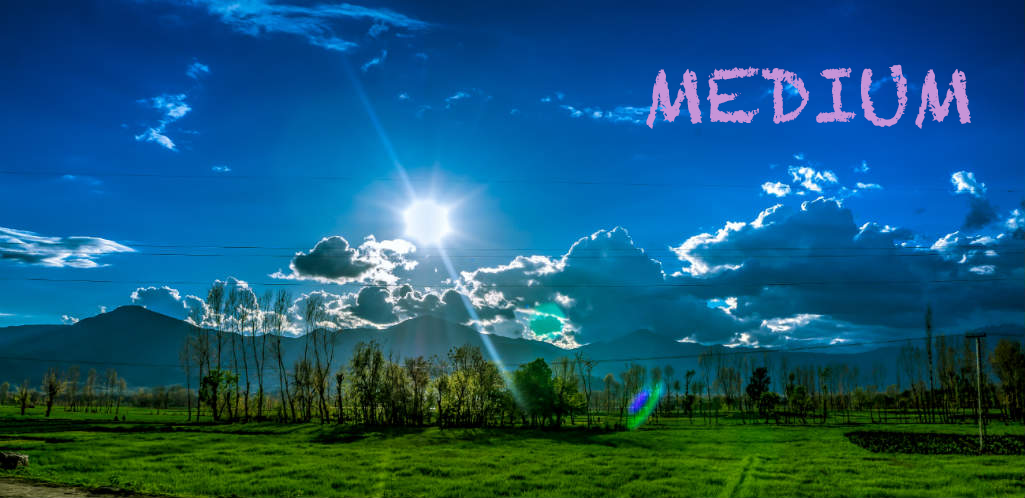
<style>
.page{position:relative;width:1025px;height:498px}
.page>*{position:absolute;margin:0}
.t1{font:75px "Chalkduster";color:#c694d8}
</style>
<div class="page">
<p class="t1" style="left:646px;top:64px;width:325px;height:65px">MEDIUM</p>
</div>
